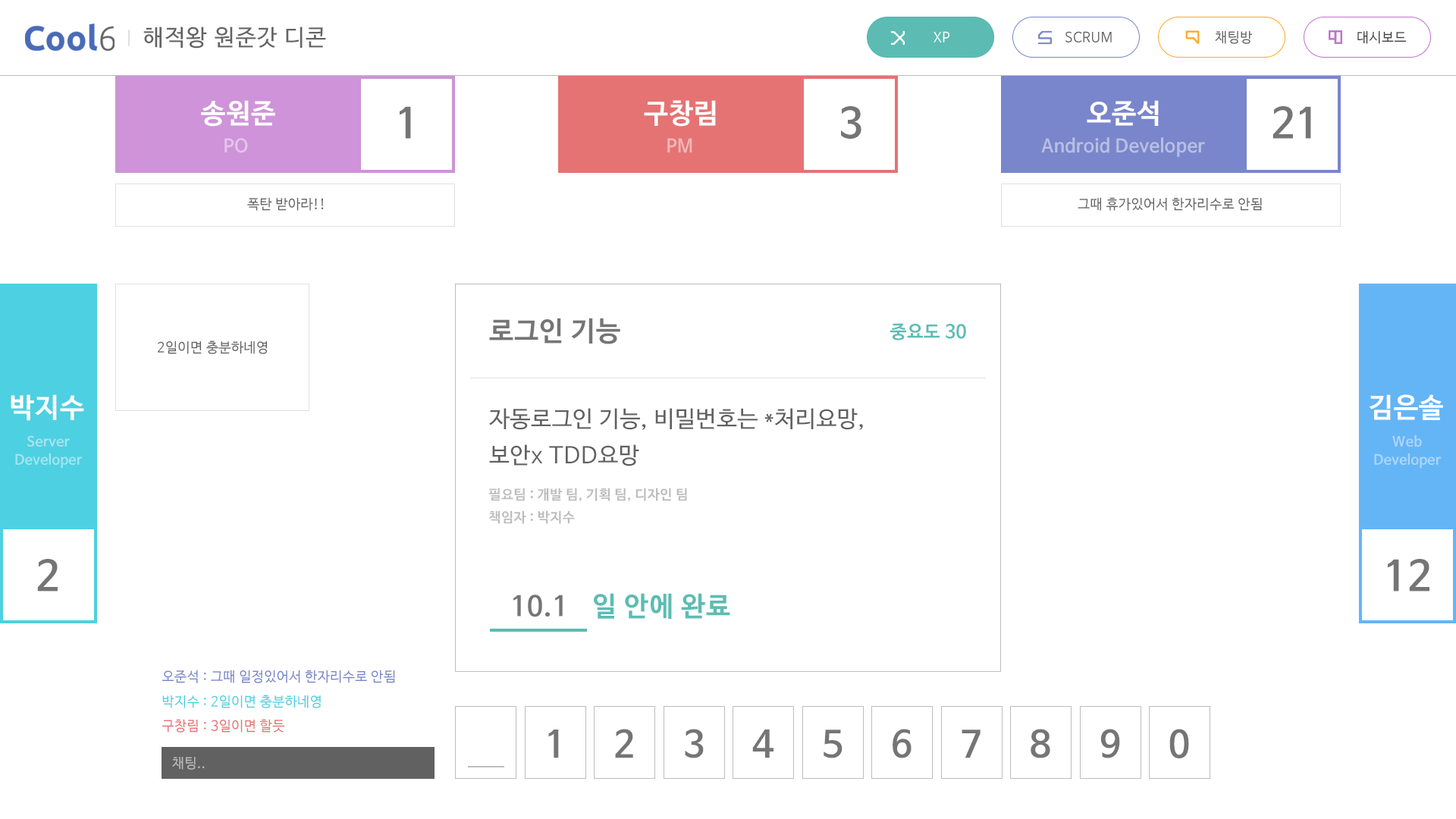
<style>
.page{position:relative;width:1456px;height:819px;background:#ffffff}
.page>*{position:absolute;margin:0}
.t1{font:22.7px "NanumBarunGothic";letter-spacing:0.05em;color:#646464}
.t2{font:13.6px "NanumBarunGothic";letter-spacing:0.025em;color:#ffffff}
.t3{font:13.6px "NanumBarunGothic";letter-spacing:0.025em;color:#646464}
.t4{font:13.6px "NanumBarunGothic";letter-spacing:0.025em;color:#424242}
.t5{font:27.3px "NanumBarunGothicBold";letter-spacing:0.025em;color:#ffffff}
.t6{font:40.9px "NanumBarunGothicBold";letter-spacing:0.025em;color:#757575}
.t7{font:18.2px "NanumBarunGothicBold";letter-spacing:0.025em;color:#b9bfe2}
.t8{font:18.2px "NanumBarunGothicBold";letter-spacing:0.025em;color:#e3c5e9}
.t9{font:18.2px "NanumBarunGothicBold";letter-spacing:0.025em;color:#f0b6b6}
.t10{font:27.3px "NanumBarunGothicBold";letter-spacing:0.025em;color:#757575}
.t11{font:18.2px "NanumBarunGothicBold";letter-spacing:0.025em;color:#5cbcb3}
.t12{font:22.7px/36.4px "NanumBarunGothic";letter-spacing:0.025em;color:#616161}
.t13{font:13.6px/18.2px "NanumBarunGothicBold";letter-spacing:0.025em;color:#a6e4ee}
.t14{font:13.6px/18.2px "NanumBarunGothicBold";letter-spacing:0.025em;color:#afd6fa}
.t15{font:13.6px "NanumBarunGothicBold";letter-spacing:0.025em;color:#bdbdbd}
.t16{font:27.3px "NanumBarunGothicBold";letter-spacing:0.025em;color:#5cbcb3}
.t17{font:13.6px "NanumBarunGothic";letter-spacing:0.025em;color:#7986cb}
.t18{font:13.6px "NanumBarunGothic";letter-spacing:0.025em;color:#4dd0e1}
.t19{font:13.6px "NanumBarunGothic";letter-spacing:0.025em;color:#e57373}
.t20{font:36.4px "NanumBarunGothicBold";letter-spacing:0.025em;color:#757575}
.t21{font:13.6px "NanumBarunGothic";letter-spacing:0.025em;color:#bbbbbb}
</style>
<div class="page">
<p class="t1" style="left:143px;top:27px;width:183px;height:22px">해적왕 원준갓 디콘</p>
<p class="t2" style="left:933px;top:31px;width:16px;height:11px">XP</p>
<p class="t3" style="left:1065px;top:31px;width:47px;height:11px">SCRUM</p>
<p class="t3" style="left:1215px;top:31px;width:37px;height:13px">채팅방</p>
<p class="t4" style="left:1357px;top:31px;width:50px;height:13px">대시보드</p>
<p class="t5" style="left:201px;top:100px;width:74px;height:27px">송원준</p>
<p class="t5" style="left:644px;top:100px;width:72px;height:27px">구창림</p>
<p class="t5" style="left:1087px;top:100px;width:72px;height:26px">오준석</p>
<p class="t6" style="left:400px;top:106px;width:11px;height:33px">1</p>
<p class="t6" style="left:841px;top:106px;width:20px;height:33px">3</p>
<p class="t6" style="left:1272px;top:106px;width:39px;height:33px">21</p>
<p class="t7" style="left:1041px;top:137px;width:164px;height:20px">Android Developer</p>
<p class="t8" style="left:224px;top:138px;width:24px;height:15px">PO</p>
<p class="t9" style="left:667px;top:138px;width:25px;height:15px">PM</p>
<p class="t3" style="left:247px;top:197px;width:77px;height:14px">폭탄 받아라!!</p>
<p class="t3" style="left:1078px;top:197px;width:184px;height:14px">그때 휴가있어서 한자리수로 안됨</p>
<p class="t10" style="left:489px;top:318px;width:131px;height:26px">로그인 기능</p>
<p class="t11" style="left:890px;top:323px;width:76px;height:17px">중요도 30</p>
<p class="t3" style="left:158px;top:340px;width:109px;height:14px">2일이면 충분하네영</p>
<p class="t5" style="left:11px;top:394px;width:73px;height:27px">박지수</p>
<p class="t5" style="left:1369px;top:394px;width:74px;height:26px">김은솔</p>
<p class="t12" style="left:489px;top:408px;width:374px;height:58px">자동로그인 기능, 비밀번호는 *처리요망, <br>보안x TDD요망</p>
<p class="t13" style="left:15px;top:435px;width:67px;height:34px;text-align:center">Server<br>Developer</p>
<p class="t14" style="left:1374px;top:435px;width:67px;height:34px;text-align:center">Web<br>Developer</p>
<p class="t15" style="left:488px;top:488px;width:199px;height:13px">필요팀 : 개발 팀, 기획 팀, 디자인 팀</p>
<p class="t15" style="left:488px;top:510px;width:87px;height:14px">책임자 : 박지수</p>
<p class="t6" style="left:37px;top:559px;width:21px;height:32px">2</p>
<p class="t6" style="left:1388px;top:559px;width:41px;height:32px">12</p>
<p class="t16" style="left:594px;top:593px;width:136px;height:26px">일 안에 완료</p>
<p class="t10" style="left:513px;top:595px;width:50px;height:22px">10.1</p>
<p class="t17" style="left:162px;top:670px;width:233px;height:13px">오준석 : 그때 일정있어서 한자리수로 안됨</p>
<p class="t18" style="left:162px;top:695px;width:159px;height:13px">박지수 : 2일이면 충분하네영</p>
<p class="t19" style="left:162px;top:719px;width:122px;height:14px">구창림 : 3일이면 할듯</p>
<p class="t20" style="left:548px;top:730px;width:11px;height:28px">1</p>
<p class="t20" style="left:615px;top:729px;width:18px;height:29px">2</p>
<p class="t20" style="left:685px;top:729px;width:19px;height:29px">3</p>
<p class="t20" style="left:752px;top:730px;width:21px;height:28px">4</p>
<p class="t20" style="left:824px;top:730px;width:18px;height:28px">5</p>
<p class="t20" style="left:893px;top:729px;width:19px;height:29px">6</p>
<p class="t20" style="left:962px;top:730px;width:19px;height:28px">7</p>
<p class="t20" style="left:1031px;top:729px;width:19px;height:29px">8</p>
<p class="t20" style="left:1100px;top:729px;width:20px;height:29px">9</p>
<p class="t20" style="left:1169px;top:729px;width:20px;height:29px">0</p>
<p class="t21" style="left:172px;top:757px;width:33px;height:13px">채팅..</p>
</div>
